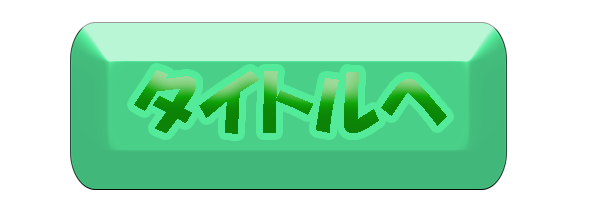
<style>
.page{position:relative;width:600px;height:200px;background:#ffffff}
.page>*{position:absolute;margin:0}
.t1{font:72px "HGPSoeiKakupoptai"}
</style>
<div class="page">
<p class="t1" style="left:134px;top:70px;width:313px;height:64px">タイトルへ</p>
</div>
